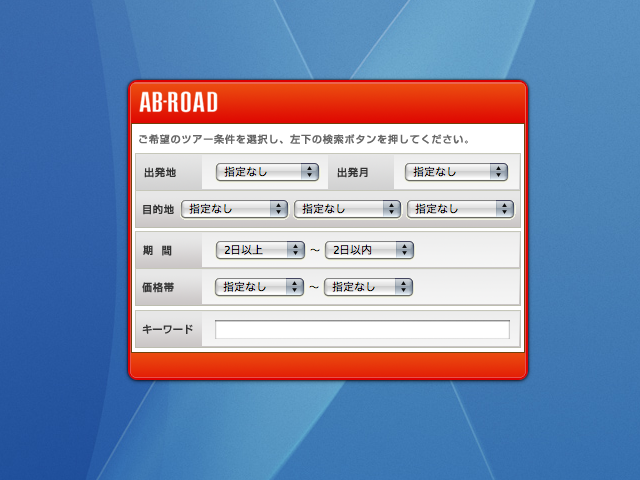
<style>
.page{position:relative;width:640px;height:480px}
.page>*{position:absolute;margin:0}
.t1{font:10px "ShinGoPro-Medium";letter-spacing:0.06em;color:#666666;font-weight:bold}
.t2{font:10px "ShinGoPro-Medium";letter-spacing:0.06em;color:#333333;font-weight:bold}
.t3{font:10px "ShinGoPro-Medium";color:#333333;font-weight:bold}
</style>
<div class="page">
<p class="t1" style="left:139px;top:134px;width:329px;height:10px">ご希望のツアー条件を選択し、左下の検索ボタンを押してください。</p>
<p class="t2" style="left:144px;top:167px;width:32px;height:11px">出発地</p>
<p class="t2" style="left:337px;top:167px;width:31px;height:11px">出発月</p>
<p class="t2" style="left:143px;top:204px;width:31px;height:11px">目的地</p>
<p class="t2" style="left:143px;top:245px;width:29px;height:11px">期 間</p>
<p class="t2" style="left:142px;top:282px;width:32px;height:11px">価格帯</p>
<p class="t3" style="left:142px;top:324px;width:51px;height:10px">キーワード</p>
</div>
